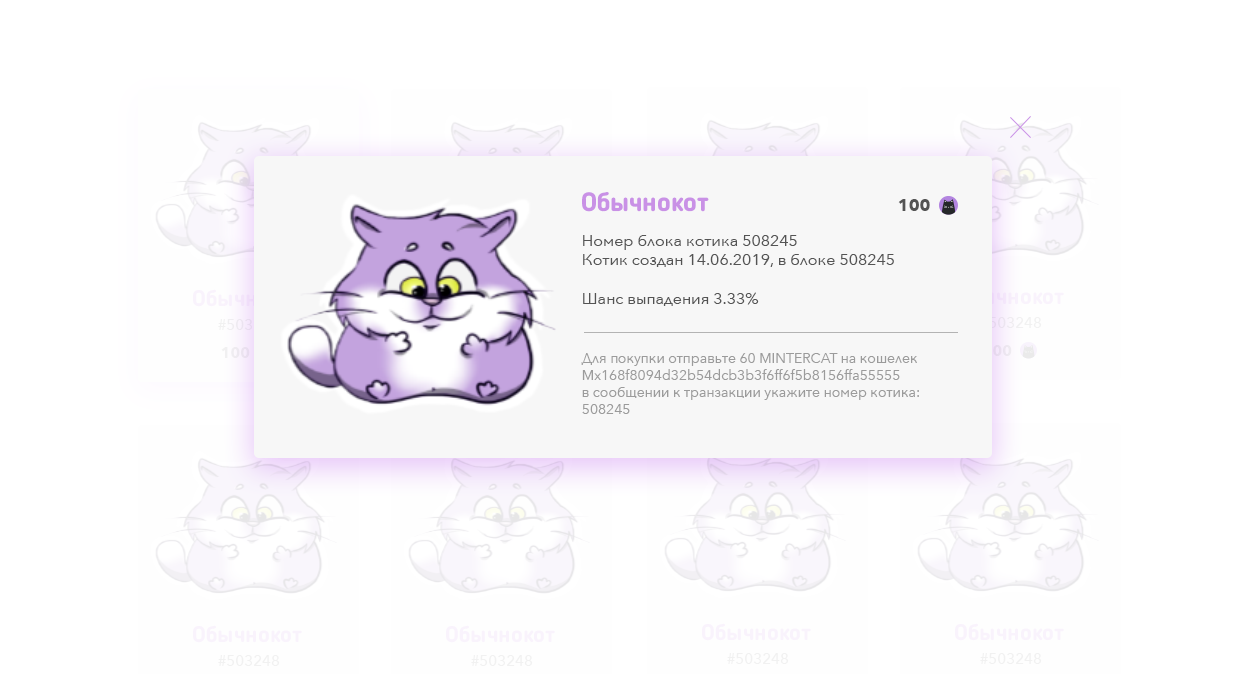
<style>
.page{position:relative;width:1240px;height:674px;background:#ffffff}
.page>*{position:absolute;margin:0}
.t1{font:26.2px "BloggerSans-Bold";color:#c991e6}
.t2{font:16.9px "AvenirNext-Bold";color:#545454}
.t3{font:16px "AvenirNext-Regular";color:#545454}
.t4{font:22.5px "BloggerSans-Bold";color:#f7f3fb}
.t5{font:15px "AvenirNext-Medium";color:#f1f1f1}
.t6{font:15px "AvenirNext-Bold";color:#ede9f0}
.t7{font:14px "AvenirNext-Regular";color:#9b9b9b}
.t8{font:15px "AvenirNext-Bold";color:#ece6f0}
.t9{font:22.5px "BloggerSans-Bold";color:#f9f3fc}
</style>
<div class="page">
<p class="t1" style="left:582px;top:192px;width:127px;height:20px">Обычнокот</p>
<p class="t2" style="left:898px;top:199px;width:32px;height:12px">100</p>
<p class="t3" style="left:583px;top:235px;width:311px;height:71px">Номер блока котика 508245 <br>Котик создан 14.06.2019, в блоке 508245 <br><br>Шанс выпадения 3.33%</p>
<p class="t4" style="left:955px;top:287px;width:109px;height:18px">Обычнокот</p>
<p class="t5" style="left:980px;top:317px;width:62px;height:11px">#503248</p>
<p class="t5" style="left:218px;top:319px;width:62px;height:11px">#503248</p>
<p class="t6" style="left:221px;top:347px;width:29px;height:11px">100</p>
<p class="t7" style="left:581px;top:353px;width:338px;height:61px">Для покупки отправьте 60 MINTERCAT на кошелек<br>Mx168f8094d32b54dcb3b3f6ff6f5b8156ffa55555<br>в сообщении к транзакции укажите номер котика:<br>508245</p>
<p class="t8" style="left:983px;top:345px;width:29px;height:11px">100</p>
<p class="t9" style="left:193px;top:625px;width:109px;height:18px">Обычнокот</p>
<p class="t9" style="left:446px;top:625px;width:109px;height:18px">Обычнокот</p>
<p class="t9" style="left:702px;top:623px;width:109px;height:18px">Обычнокот</p>
<p class="t9" style="left:955px;top:623px;width:109px;height:18px">Обычнокот</p>
<p class="t5" style="left:727px;top:653px;width:62px;height:11px">#503248</p>
<p class="t5" style="left:980px;top:653px;width:62px;height:11px">#503248</p>
<p class="t5" style="left:218px;top:655px;width:62px;height:11px">#503248</p>
<p class="t5" style="left:471px;top:655px;width:62px;height:11px">#503248</p>
</div>
